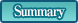
<style>
.page{position:relative;width:78px;height:23px;background:#115777}
.page>*{position:absolute;margin:0}
.t1{font:14px "RyuminPro-ExBold";letter-spacing:-0.08em;color:#ffffff;scale:0.9 1}
</style>
<div class="page">
<p class="t1" style="left:14px;top:5px;width:51px;height:14px">Summary</p>
</div>
